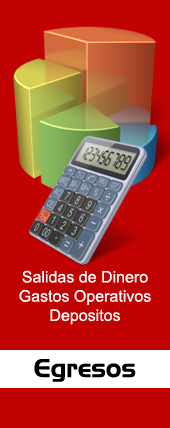
<style>
.page{position:relative;width:170px;height:428px;background:#c00202}
.page>*{position:absolute;margin:0}
.t1{font:16px "ArialMT";color:#ffffff}
.t2{font:25px "AeroRegularSWFTE";color:#000000}
</style>
<div class="page">
<p class="t1" style="left:19px;top:270px;width:132px;height:55px;text-align:center">Salidas de Dinero<br>Gastos Operativos<br>Depositos</p>
<p class="t2" style="left:34px;top:359px;width:102px;height:23px">Egresos</p>
</div>
